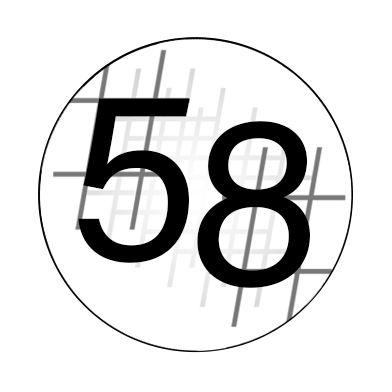
<style>
.page{position:relative;width:392px;height:392px;background:#ffffff}
.page>*{position:absolute;margin:0}
.t1{font:232.3px "AcuminConcept-Regular";color:#000000;text-transform:uppercase}
</style>
<div class="page">
<p class="t1" style="left:78px;top:98px;width:112px;height:165px">5</p>
<p class="t1" style="left:197px;top:121px;width:113px;height:167px">8</p>
</div>
